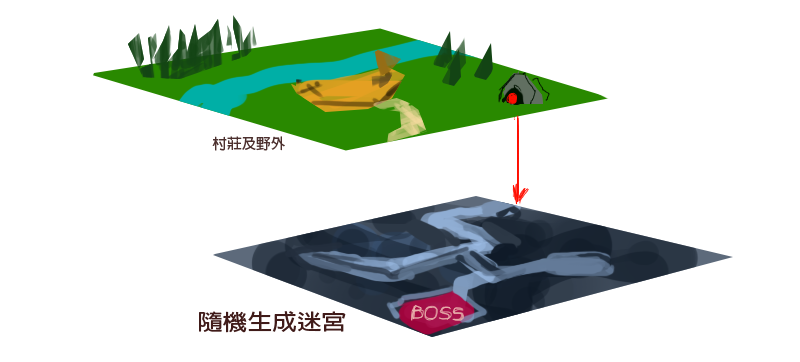
<style>
.page{position:relative;width:800px;height:362px;background:#ffffff}
.page>*{position:absolute;margin:0}
.t1{font:14.6px "AdobeFanHeitiStd-Bold";color:#4c302e}
.t2{font:21.9px "AdobeFanHeitiStd-Bold";color:#401b19;scale:1.13 1}
</style>
<div class="page">
<p class="t1" style="left:212px;top:136px;width:73px;height:15px">村莊及野外</p>
<p class="t2" style="left:199px;top:311px;width:147px;height:22px">隨機生成迷宮</p>
</div>
